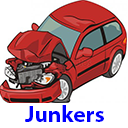
<style>
.page{position:relative;width:128px;height:128px;background:#ffffff}
.page>*{position:absolute;margin:0}
.t1{font:23px "MyriadPro-Bold";color:#0000ff}
</style>
<div class="page">
<p class="t1" style="left:25px;top:105px;width:79px;height:17px">Junkers</p>
</div>
